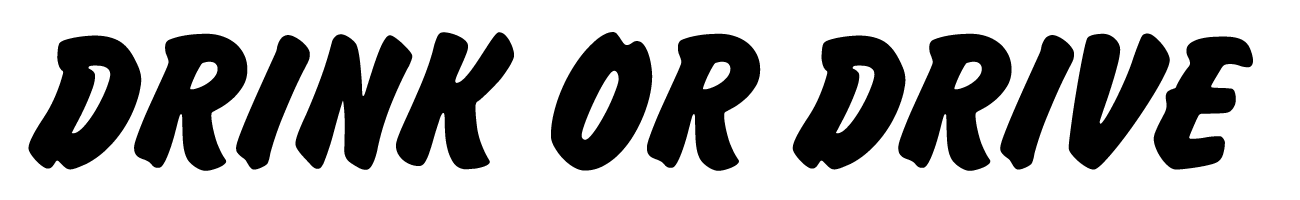
<style>
.page{position:relative;width:1300px;height:200px;background:#ffffff}
.page>*{position:absolute;margin:0}
.t1{font:200px "BrushHandNew";color:#000000}
</style>
<div class="page">
<p class="t1" style="left:28px;top:32px;width:1225px;height:139px">DRINK OR DRIVE</p>
</div>
